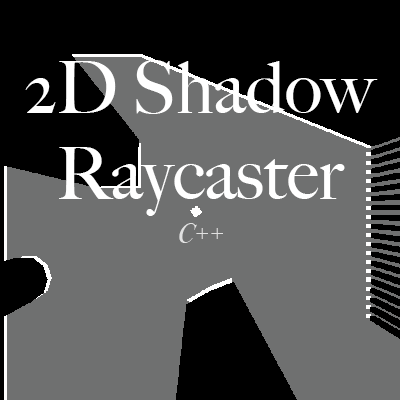
<style>
.page{position:relative;width:400px;height:400px;background:#6f7070}
.page>*{position:absolute;margin:0}
.t1{font:72px "BigCaslon-Medium";color:#ffffff}
.t2{font:28px "BodoniSvtyTwoITCTT-BookIta";color:#e1e1e1}
</style>
<div class="page">
<p class="t1" style="left:25px;top:60px;width:353px;height:156px;text-align:center">2D Shadow<br>Raycaster</p>
<p class="t2" style="left:179px;top:223px;width:44px;height:20px">C++</p>
</div>
